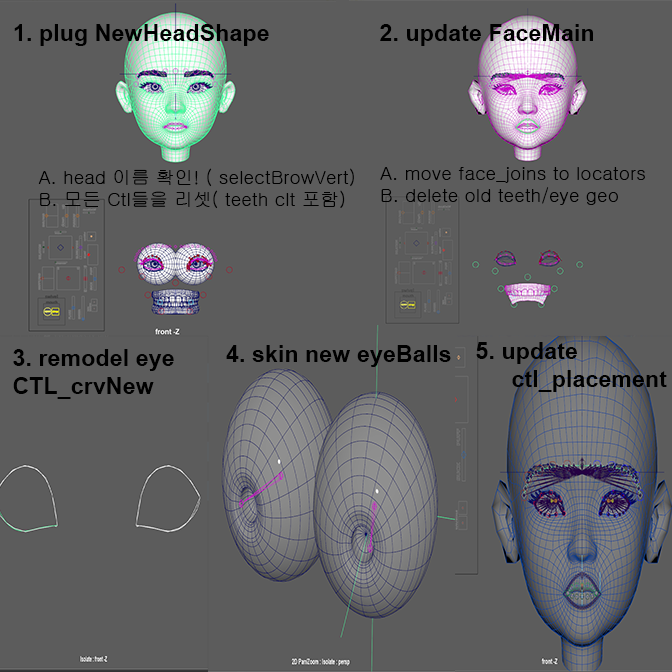
<style>
.page{position:relative;width:672px;height:672px;background:#5c5c5c}
.page>*{position:absolute;margin:0}
.t1{font:23.3px "Arial-BoldMT";color:#000000}
.t2{font:18.7px "Gulim";color:#000000}
</style>
<div class="page">
<p class="t1" style="left:14px;top:24px;width:579px;height:22px">1. plug NewHeadShape             2. update FaceMain</p>
<p class="t2" style="left:38px;top:168px;width:316px;height:41px">A. head 이름 확인! ( selectBrowVert)<br>B. 모든 Ctl들을 리셋( teeth clt 포함)</p>
<p class="t2" style="left:380px;top:167px;width:265px;height:38px">A. move face_joins to locators<br>B. delete old teeth/eye geo</p>
<p class="t1" style="left:476px;top:342px;width:191px;height:50px">5. update<br> ctl_placement</p>
<p class="t1" style="left:13px;top:349px;width:161px;height:50px">3. remodel eye <br>CTL_crvNew</p>
<p class="t1" style="left:226px;top:345px;width:225px;height:22px">4. skin new eyeBalls</p>
</div>
